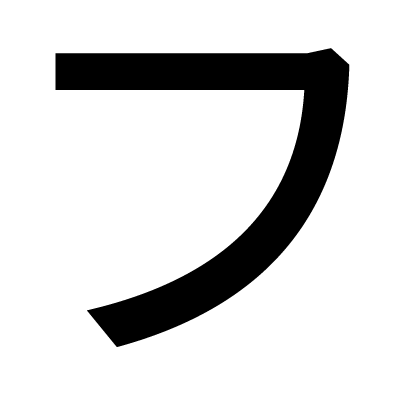
<style>
.page{position:relative;width:400px;height:400px;background:#ffffff}
.page>*{position:absolute;margin:0}
.t1{font:424.8px "MS-PGothic";color:#000000}
</style>
<div class="page">
<p class="t1" style="left:55px;top:48px;width:295px;height:299px">フ</p>
</div>
